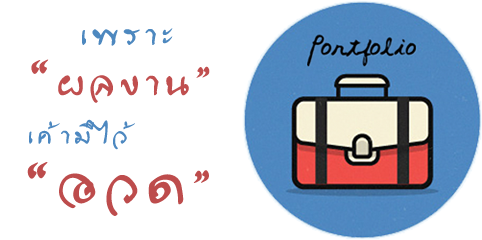
<style>
.page{position:relative;width:482px;height:240px;background:#ffffff}
.page>*{position:absolute;margin:0}
.t1{font:32.5px "Arthit";letter-spacing:0.16em;color:#4d88bf}
.t2{font:39.4px "Arthit";letter-spacing:0.16em;color:#c04f4f}
.t3{font:51.2px "Arthit";letter-spacing:0.16em;color:#c04f4f}
.t4{font:26.6px "Arthit";letter-spacing:0.16em;color:#4d88c0}
.t5{font:59.6px "Arthit";letter-spacing:0.16em;color:#bd4c4c}
.t6{font:45.9px "Arthit";letter-spacing:0.16em;color:#bd4c4c}
</style>
<div class="page">
<p class="t1" style="left:82px;top:28px;width:91px;height:18px">เพราะ</p>
<p class="t2" style="left:31px;top:59px;width:179px;height:44px"><span class="t3">“</span>ผลงาน”</p>
<p class="t4" style="left:29px;top:119px;width:106px;height:31px">เค้ามีไว้</p>
<p class="t5" style="left:27px;top:162px;width:182px;height:54px">“อวด<span class="t6">”</span></p>
</div>
